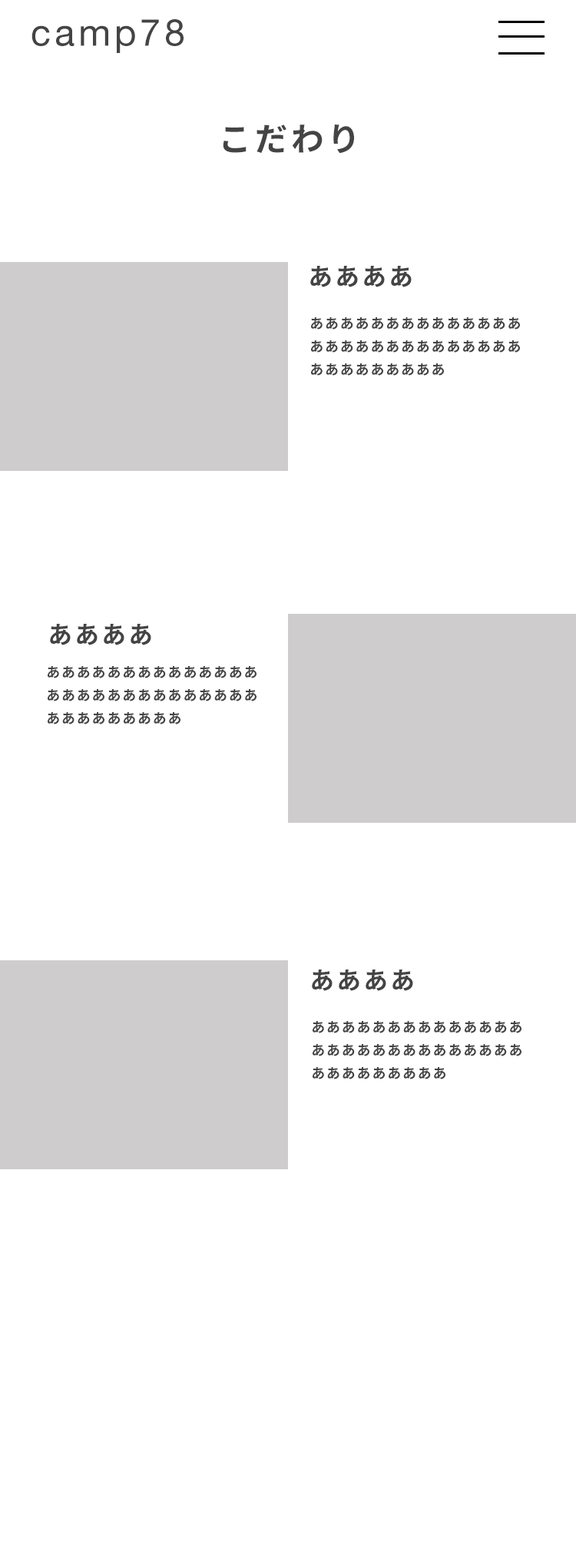
<style>
.page{position:relative;width:576px;height:1568px;background:#ffffff}
.page>*{position:absolute;margin:0}
.t1{font:37.3px "HelveticaNeue";letter-spacing:0.1em;color:#444444}
.t2{font:33px "NotoSansCJKjp-Bold";letter-spacing:0.1em;color:#444444}
.t3{font:24.4px "NotoSansCJKjp-Bold";letter-spacing:0.1em;color:#444444}
.t4{font:13.8px/23px "NotoSansCJKjp-Bold";letter-spacing:0.1em;color:#444444}
</style>
<div class="page">
<p class="t1" style="left:31px;top:19px;width:153px;height:34px">camp78</p>
<p class="t2" style="left:223px;top:124px;width:131px;height:30px">こだわり</p>
<p class="t3" style="left:310px;top:266px;width:102px;height:21px">ああああ</p>
<p class="t4" style="left:311px;top:317px;width:209px;height:59px">ああああああああああああああ<br>ああああああああああああああ<br>あああああああああ</p>
<p class="t3" style="left:50px;top:624px;width:101px;height:21px">ああああ</p>
<p class="t4" style="left:48px;top:666px;width:209px;height:58px">ああああああああああああああ<br>ああああああああああああああ<br>あああああああああ</p>
<p class="t3" style="left:312px;top:970px;width:101px;height:21px">ああああ</p>
<p class="t4" style="left:313px;top:1021px;width:209px;height:58px">ああああああああああああああ<br>ああああああああああああああ<br>あああああああああ</p>
</div>
